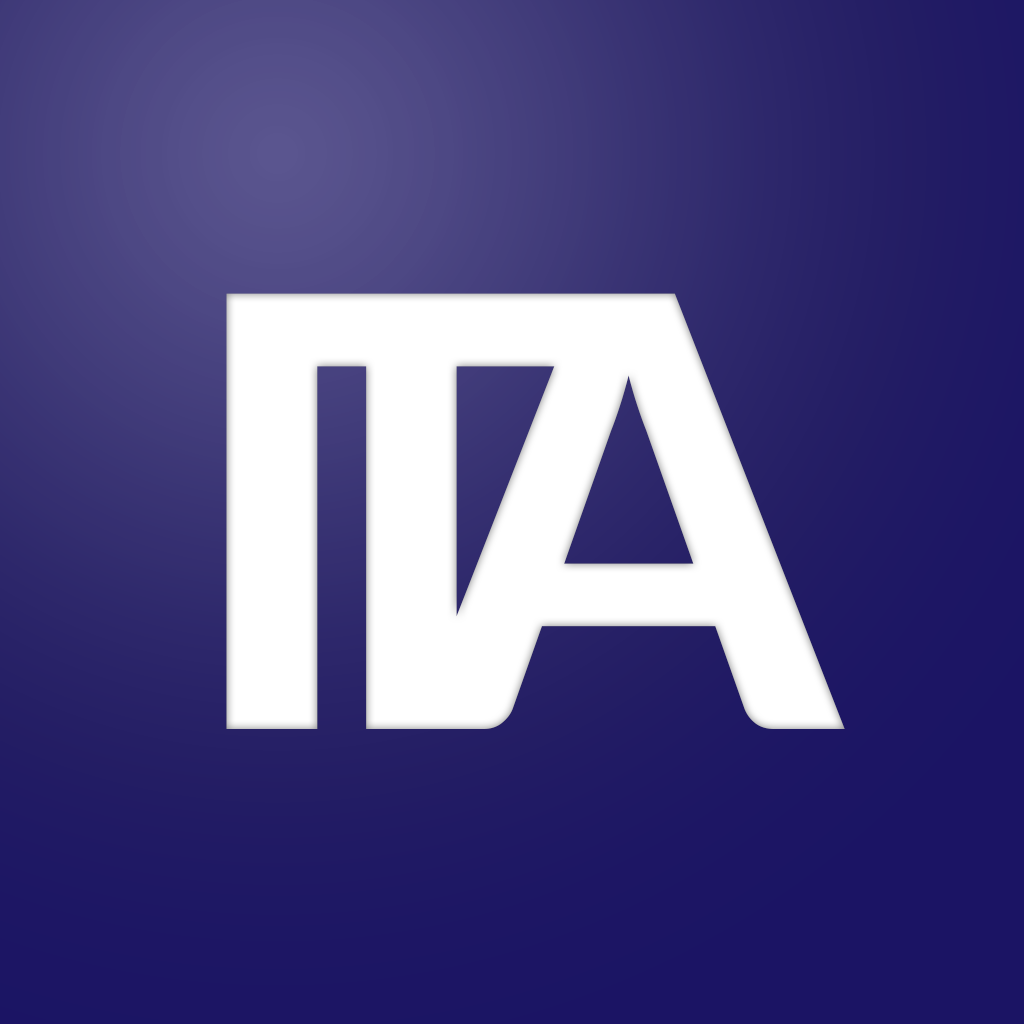
<style>
.page{position:relative;width:1024px;height:1024px}
.page>*{position:absolute;margin:0}
.t1{font:600px "Lato-Heavy";letter-spacing:-0.22em;color:#ffffff}
</style>
<div class="page">
<p class="t1" style="left:226px;top:293px;width:619px;height:436px">ITA</p>
</div>
